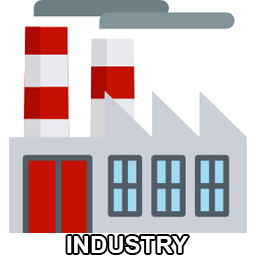
<style>
.page{position:relative;width:256px;height:256px;background:#ffffff}
.page>*{position:absolute;margin:0}
.t1{font:24px "Arial-BoldMT";color:#ffffff}
</style>
<div class="page">
<p class="t1" style="left:67px;top:236px;width:121px;height:17px">INDUSTRY</p>
</div>
